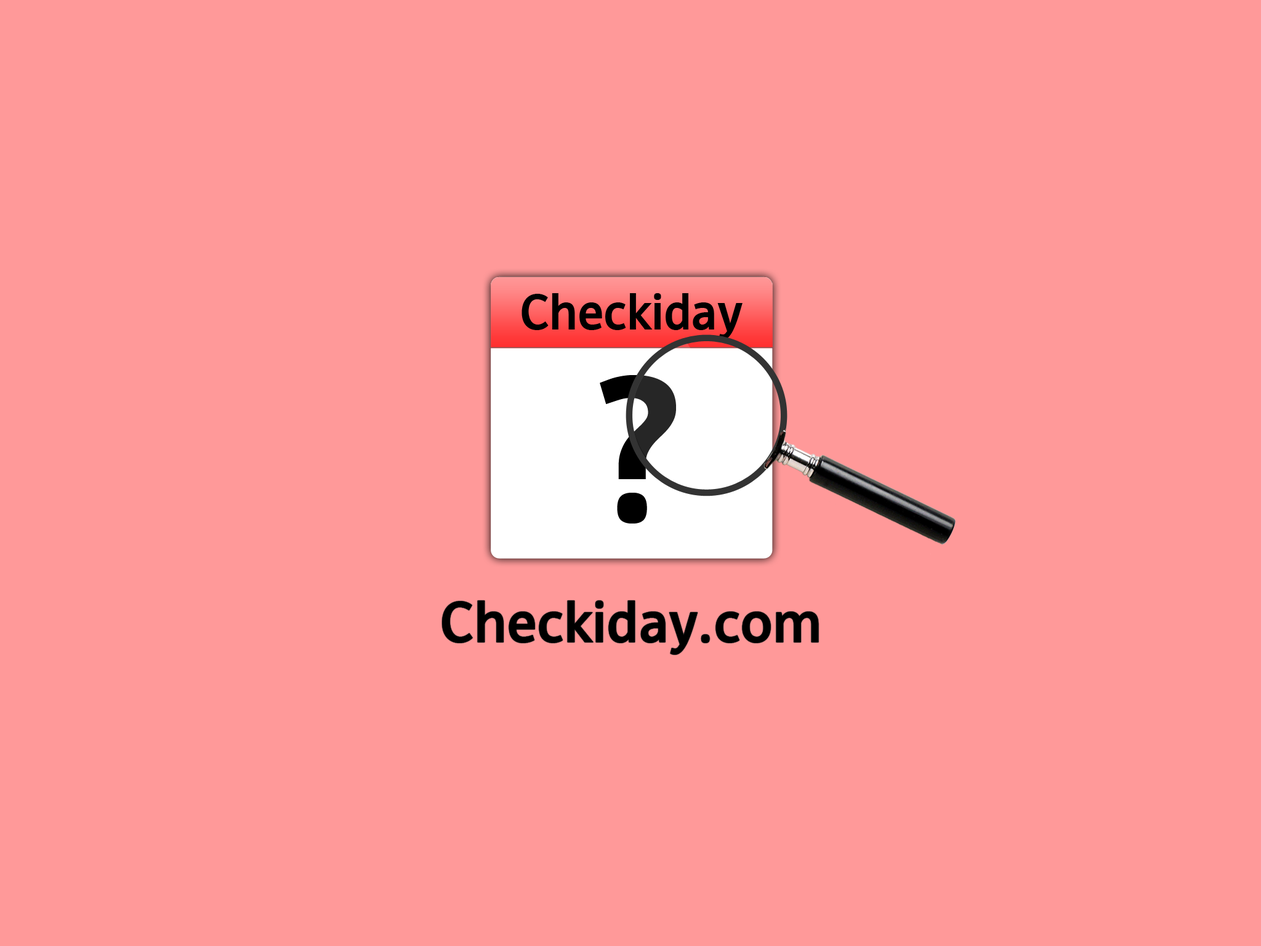
<style>
.page{position:relative;width:1261px;height:946px;background:#ff9999}
.page>*{position:absolute;margin:0}
.t1{font:47.8px "DejaWeb-Bold";color:#000000}
.t2{font:196.9px "DejaWeb-Bold"}
.t3{font:55.4px "DejaWeb-Bold";color:#000000}
</style>
<div class="page">
<p class="t1" style="left:521px;top:293px;width:222px;height:47px">Checkiday</p>
<p class="t2" style="left:600px;top:375px;width:76px;height:148px">?</p>
<p class="t3" style="left:442px;top:600px;width:377px;height:54px">Checkiday.com</p>
</div>
